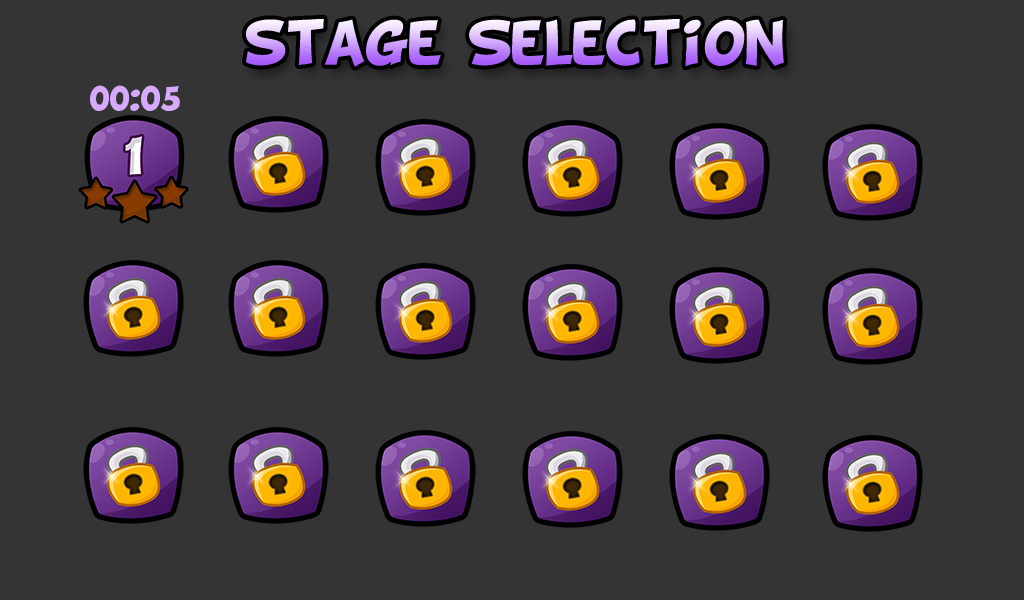
<style>
.page{position:relative;width:1024px;height:600px;background:#343434}
.page>*{position:absolute;margin:0}
.t1{font:50px "BDCartoonShout"}
.t2{font:30px "BDCartoonShout";color:#d6a9fc}
</style>
<div class="page">
<p class="t1" style="left:246px;top:18px;width:538px;height:49px">stage Selection</p>
<p class="t2" style="left:90px;top:85px;width:90px;height:26px">00:05</p>
</div>
